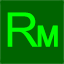
<style>
.page{position:relative;width:64px;height:64px;background:#006400}
.page>*{position:absolute;margin:0}
.t1{font:48px "LingoesUnicode";color:#00ff00}
.t2{font:48px "LingoesUnicode";color:#00ff00;font-weight:bold}
</style>
<div class="page">
<p class="t1" style="left:7px;top:12px;width:31px;height:35px">R</p>
<p class="t2" style="left:37px;top:25px;width:21px;height:22px">M</p>
</div>
